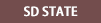
<style>
.page{position:relative;width:101px;height:23px;background:#734d4d}
.page>*{position:absolute;margin:0}
.t1{font:12px "AdobeHeitiStd-Regular";color:#ffffff;font-weight:bold}
</style>
<div class="page">
<p class="t1" style="left:24px;top:6px;width:54px;height:11px">SD STATE</p>
</div>
